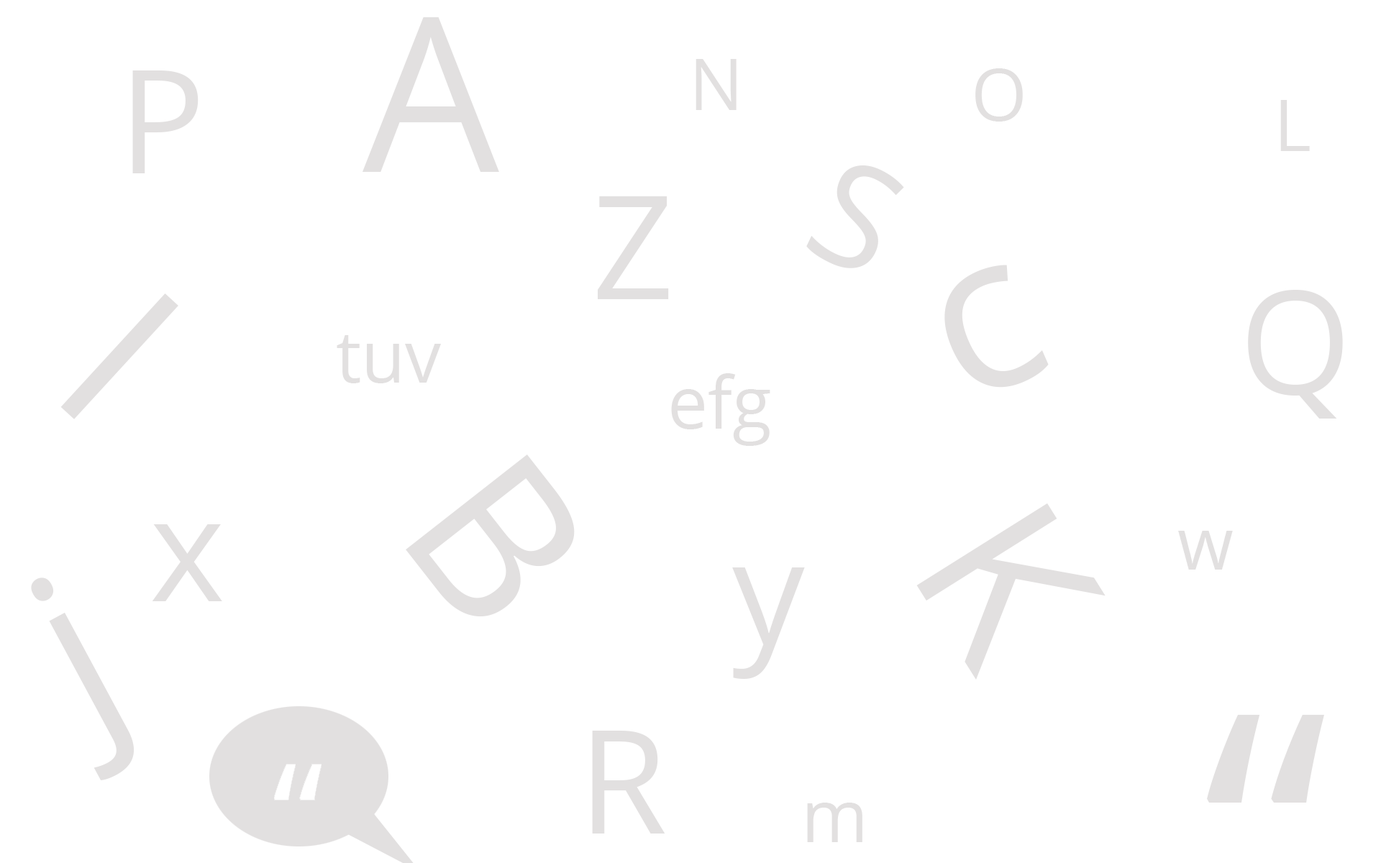
<style>
.page{position:relative;width:1381px;height:863px;background:#ffffff}
.page>*{position:absolute;margin:0}
.t1{font:215.8px "OpenSans";color:#eeeeee}
.t2{font:71.9px "OpenSans";color:#eeeeee}
.t3{font:143.9px "OpenSans";color:#eeeeee}
.t4{font:359.7px "OpenSans";color:#eeeeee}
</style>
<div class="page">
<p class="t1" style="left:363px;top:17px;width:136px;height:155px">A</p>
<p class="t2" style="left:696px;top:59px;width:41px;height:51px">N</p>
<p class="t3" style="left:132px;top:70px;width:67px;height:103px">P</p>
<p class="t2" style="left:976px;top:68px;width:47px;height:54px">O</p>
<p class="t2" style="left:1281px;top:100px;width:29px;height:51px">L</p>
<p class="t3" style="left:806px;top:165px;width:98px;height:103px;rotate:26deg">S</p>
<p class="t3" style="left:598px;top:196px;width:71px;height:103px">Z</p>
<p class="t1" style="left:945px;top:265px;width:104px;height:123px;rotate:-24deg">c</p>
<p class="t1" style="left:60px;top:294px;width:118px;height:125px;rotate:43deg">I</p>
<p class="t3" style="left:1248px;top:289px;width:95px;height:130px">Q</p>
<p class="t2" style="left:337px;top:335px;width:104px;height:48px">tuv</p>
<p class="t2" style="left:671px;top:373px;width:99px;height:73px">efg</p>
<p class="t1" style="left:406px;top:455px;width:169px;height:162px;rotate:52deg">B</p>
<p class="t1" style="left:917px;top:503px;width:189px;height:177px;rotate:58deg">K</p>
<p class="t3" style="left:152px;top:524px;width:70px;height:77px">x</p>
<p class="t2" style="left:1178px;top:531px;width:55px;height:39px">w</p>
<p class="t3" style="left:732px;top:568px;width:73px;height:111px">y</p>
<p class="t1" style="left:31px;top:578px;width:104px;height:203px;rotate:-28deg">j</p>
<p class="t4" style="left:1207px;top:714px;width:117px;height:89px">“</p>
<p class="t3" style="left:592px;top:730px;width:73px;height:104px">R</p>
<p class="t2" style="left:807px;top:803px;width:56px;height:39px">m</p>
</div>
